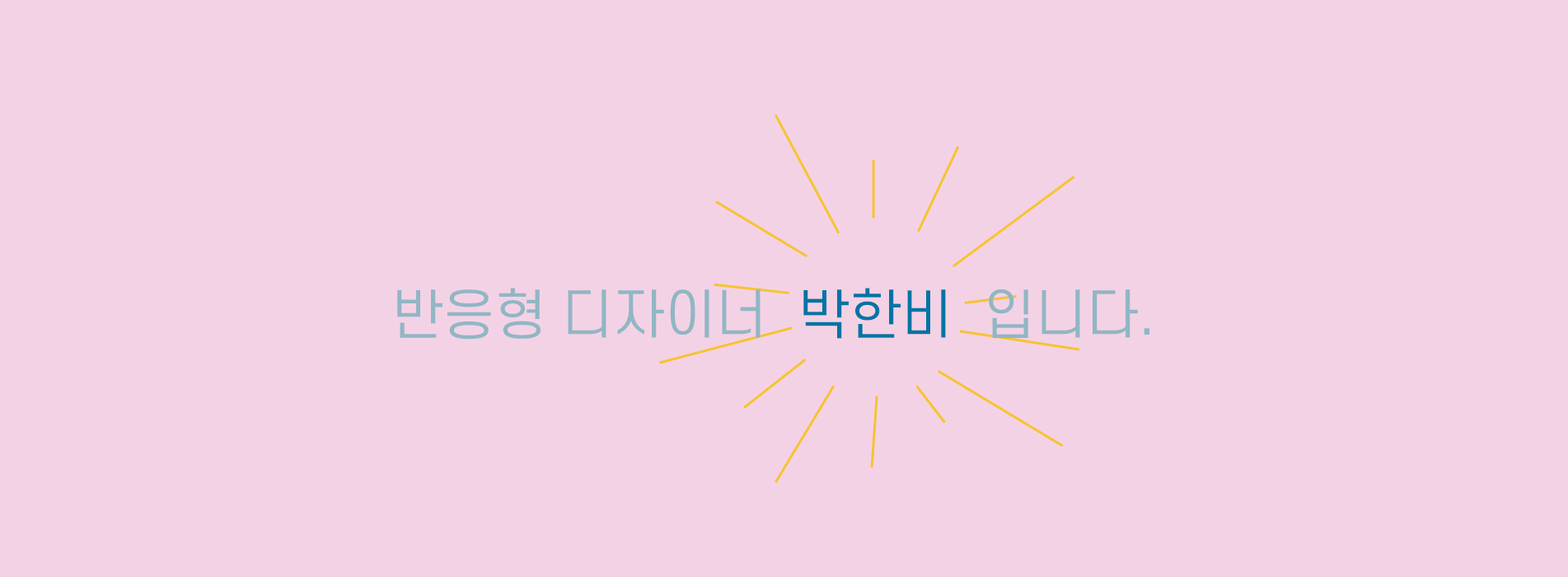
<style>
.page{position:relative;width:1568px;height:577px;background:#f4d2e5}
.page>*{position:absolute;margin:0}
.t1{font:53.6px "S-CoreDream-4Regular";color:#91b6c5}
.t2{font:53.6px "S-CoreDream-4Regular";color:#0074a4}
</style>
<div class="page">
<p class="t1" style="left:397px;top:288px;width:752px;height:51px">반응형 디자이너  <span class="t2">박한비</span>  입니다.</p>
</div>
